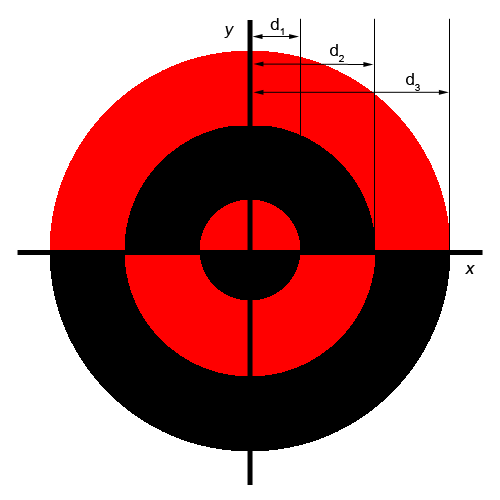
<style>
.page{position:relative;width:500px;height:500px;background:#ffffff}
.page>*{position:absolute;margin:0}
.t1{font:16.7px "ArialMT";color:#000000;font-style:italic}
.t2{font:16.7px "ArialMT";color:#000000}
</style>
<div class="page">
<p class="t1" style="left:224px;top:26px;width:10px;height:12px">y</p>
<p class="t2" style="left:270px;top:18px;width:14px;height:17px">d1</p>
<p class="t2" style="left:330px;top:44px;width:14px;height:18px">d2</p>
<p class="t2" style="left:406px;top:73px;width:14px;height:18px">d3</p>
<p class="t1" style="left:465px;top:265px;width:10px;height:9px">x</p>
</div>
